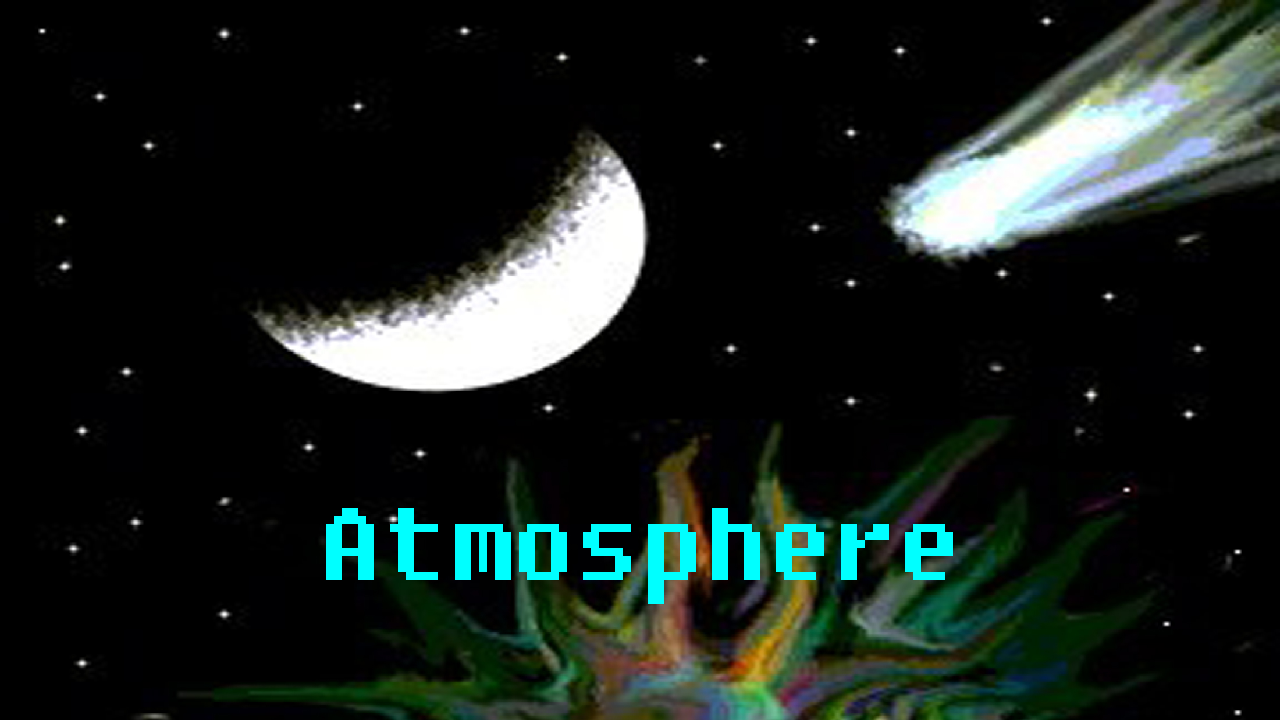
<style>
.page{position:relative;width:1280px;height:720px;background:#000000}
.page>*{position:absolute;margin:0}
.t1{font:103px "Fixedsys";color:#00ffff}
</style>
<div class="page">
<p class="t1" style="left:326px;top:508px;width:627px;height:96px">Atmosphere</p>
</div>
